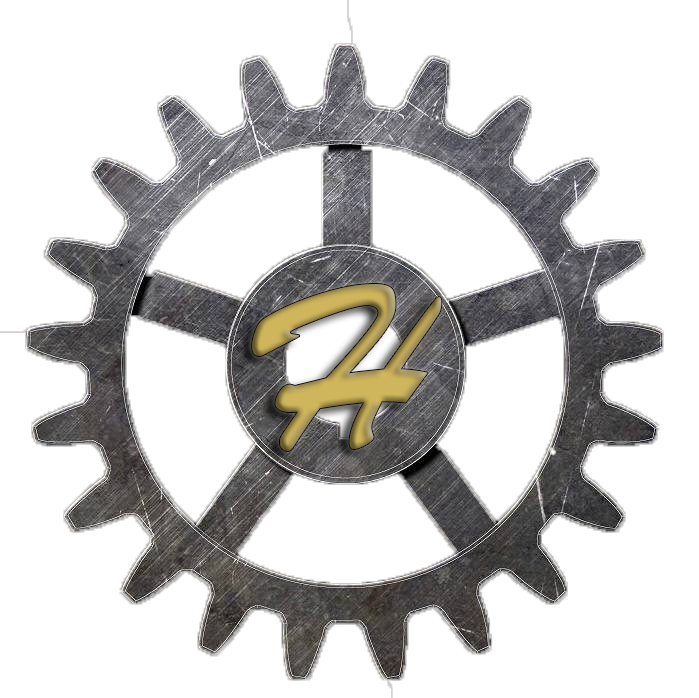
<style>
.page{position:relative;width:699px;height:698px;background:#ffffff}
.page>*{position:absolute;margin:0}
.t1{font:250px "BrushScriptMT"}
</style>
<div class="page">
<p class="t1" style="left:252px;top:284px;width:190px;height:167px">H</p>
</div>
